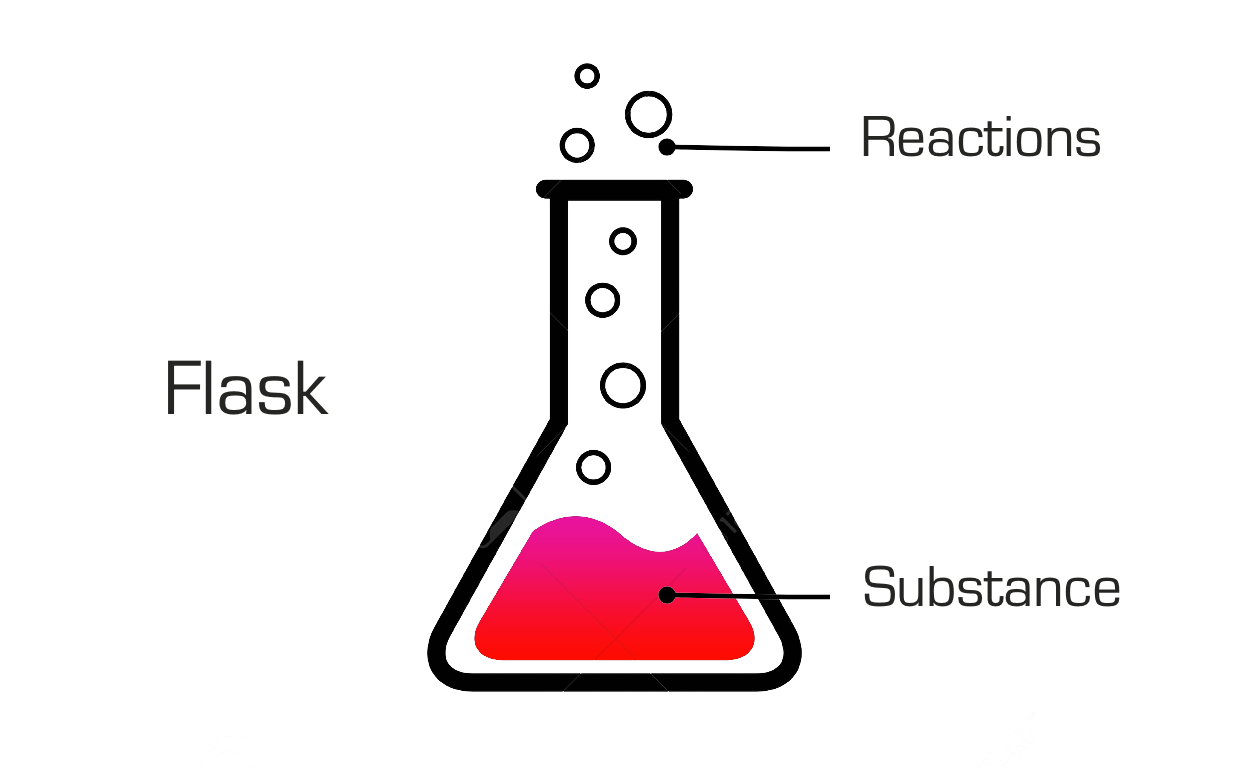
<style>
.page{position:relative;width:1240px;height:768px;background:#ffffff}
.page>*{position:absolute;margin:0}
.t1{font:60px "EurostileRegular";letter-spacing:-0.01em;color:#252523}
.t2{font:80px "EurostileRegular";letter-spacing:-0.01em;color:#252523}
</style>
<div class="page">
<p class="t1" style="left:863px;top:116px;width:238px;height:41px">Reactions</p>
<p class="t2" style="left:168px;top:360px;width:161px;height:55px">Flask</p>
<p class="t1" style="left:864px;top:565px;width:256px;height:42px">Substance</p>
</div>
